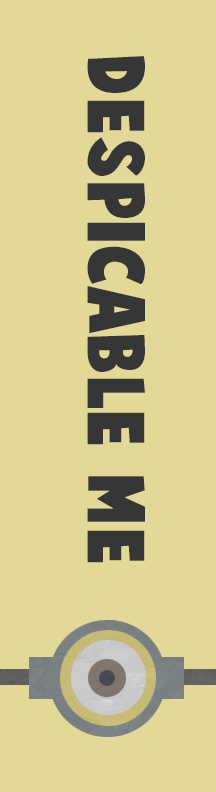
<style>
.page{position:relative;width:216px;height:792px;background:#e2d897}
.page>*{position:absolute;margin:0}
.t1{font:72px "CartoonistKooky";color:#363636}
</style>
<div class="page">
<p class="t1" style="left:87px;top:56px;width:58px;height:507px;rotate:90deg">Despicable me</p>
</div>
